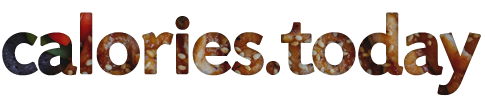
<style>
.page{position:relative;width:485px;height:105px;background:#ffffff}
.page>*{position:absolute;margin:0}
.t1{font:85px "TodaySHOP-Medium";font-weight:bold}
</style>
<div class="page">
<p class="t1" style="left:2px;top:12px;width:479px;height:84px">calories.today</p>
</div>
